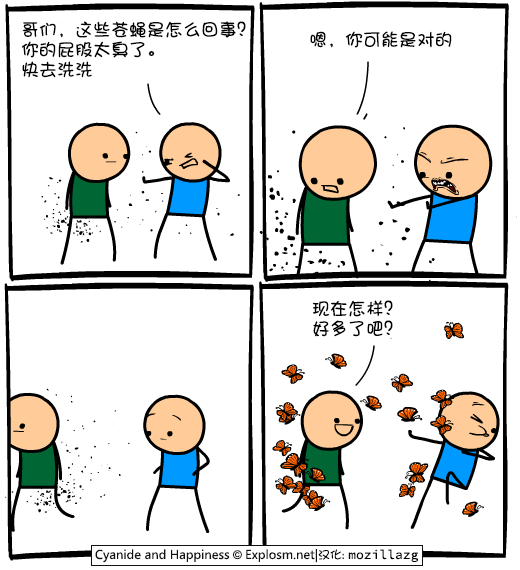
<style>
.page{position:relative;width:520px;height:570px;background:#ffffff}
.page>*{position:absolute;margin:0}
.t1{font:18px/20px "DFPShaoNvW5";color:#000000}
.t2{font:18px "DFPShaoNvW5";color:#000000}
</style>
<div class="page">
<p class="t1" style="left:21px;top:21px;width:225px;height:57px">哥们，这些苍蝇是怎么回事？<br>你的屁股太臭了。<br>快去洗洗</p>
<p class="t2" style="left:310px;top:31px;width:142px;height:17px">嗯，你可能是对的</p>
<p class="t1" style="left:312px;top:300px;width:81px;height:37px">现在怎样？<br>好多了吧？</p>
</div>
